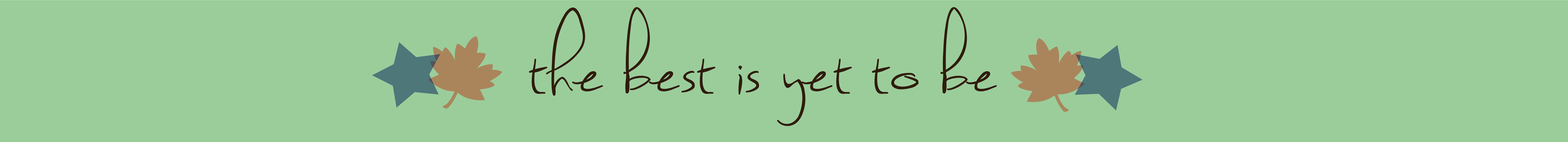
<style>
.page{position:relative;width:1568px;height:142px;background:#9bcd9b}
.page>*{position:absolute;margin:0}
.t1{font:100.5px "SweetlyBroken";color:#2f1c0c}
</style>
<div class="page">
<p class="t1" style="left:529px;top:7px;width:468px;height:119px">the best is yet to be</p>
</div>
